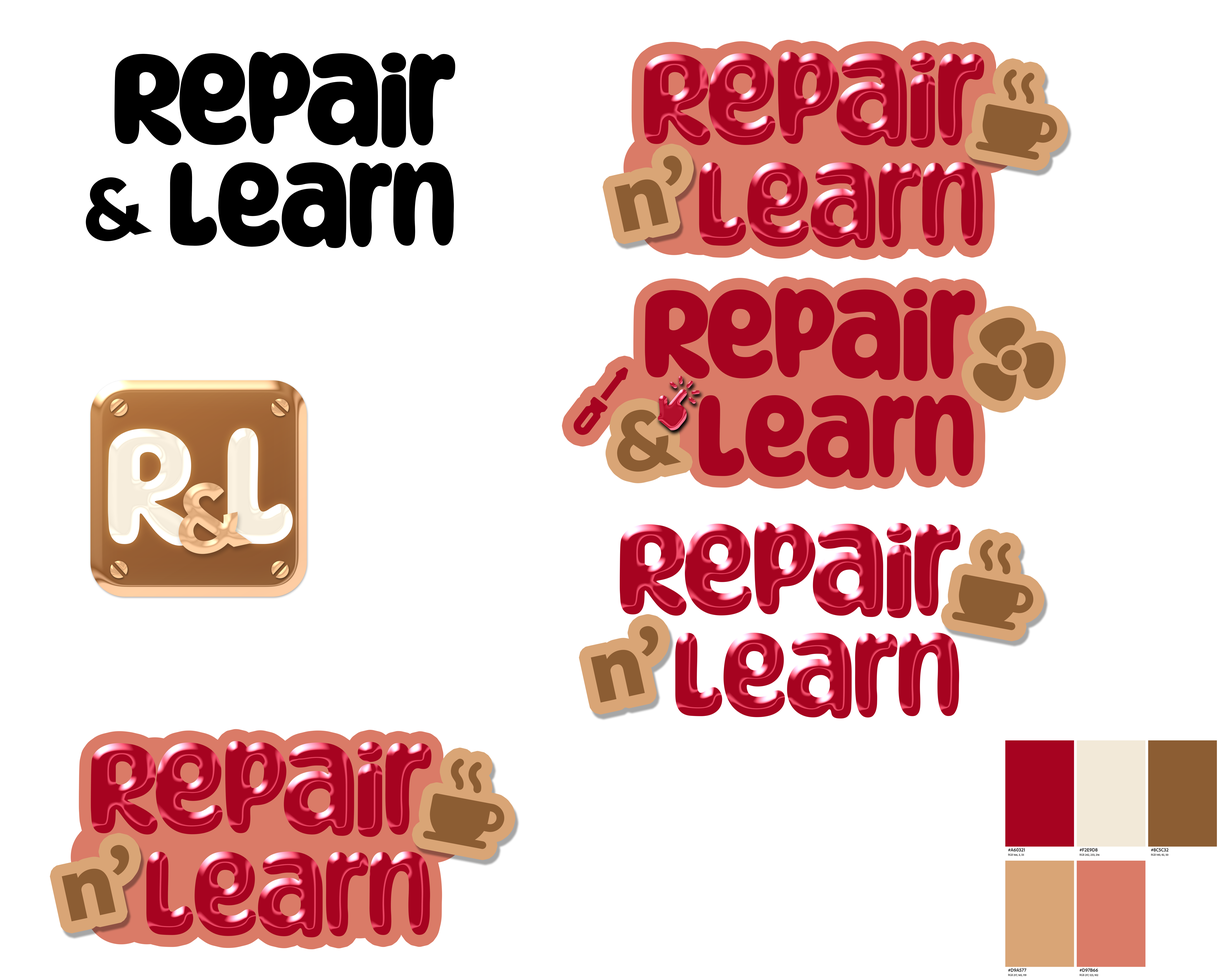
<style>
.page{position:relative;width:1221px;height:977px;background:#ffffff}
.page>*{position:absolute;margin:0}
.t1{font:127.2px/101.7px "MotleyForces-Regular";letter-spacing:-0.025em;color:#000000}
.t2{font:117px/101.7px "MotleyForces-Regular";letter-spacing:-0.025em;color:#000000}
.t3{font:127.2px/101.7px "MotleyForces-Regular";letter-spacing:-0.025em;color:#a60320}
.t4{font:117px/101.7px "MotleyForces-Regular";letter-spacing:-0.025em;color:#a60320}
.t5{font:86.5px "Lexend-Bold";letter-spacing:-0.025em;color:#000000}
.t6{font:162.8px "MotleyForces-Regular";letter-spacing:-0.025em;color:#f2e9d8}
.t7{font:96.6px "Lexend-Bold";letter-spacing:-0.025em}
</style>
<div class="page">
<p class="t1" style="left:115px;top:52px;width:340px;height:196px;text-align:right">Repair<br><span class="t2">Learn</span></p>
<p class="t3" style="left:644px;top:52px;width:340px;height:196px;text-align:right">Repair<br><span class="t4">Learn</span></p>
<p class="t5" style="left:86px;top:177px;width:66px;height:64px;rotate:-12deg">&amp;</p>
<p class="t6" style="left:108px;top:428px;width:185px;height:117px">R L</p>
<p class="t7" style="left:178px;top:482px;width:74px;height:72px;rotate:-12deg">&amp;</p>
</div>
